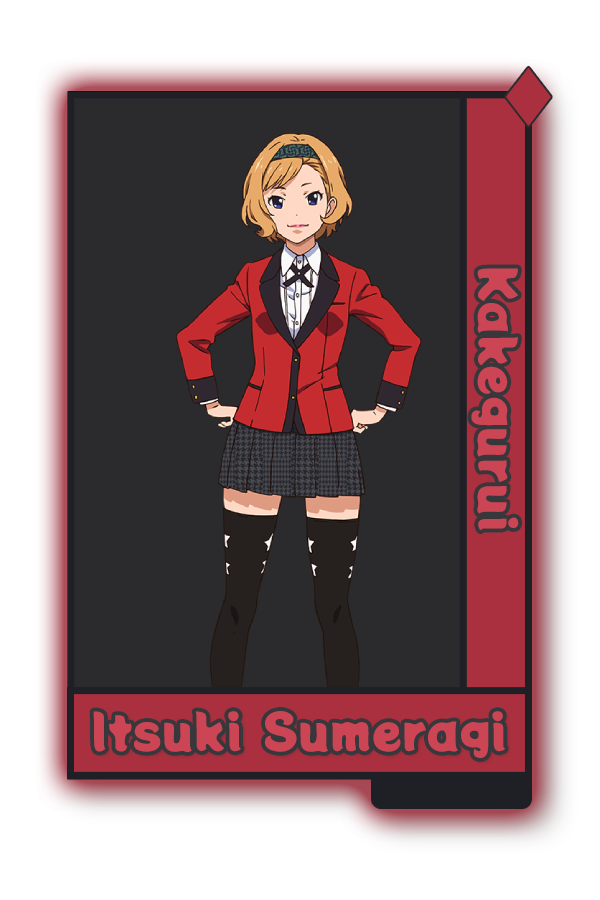
<style>
.page{position:relative;width:600px;height:900px;background:#2b2a2d}
.page>*{position:absolute;margin:0}
.t1{font:80px "DejaVuSans";color:#ab303f}
.t2{font:50px "PottaOne-Regular";color:#cb4554}
</style>
<div class="page">
<p class="t1" style="left:506px;top:67px;width:45px;height:59px">♦️</p>
<p class="t2" style="left:471px;top:268px;width:48px;height:263px;rotate:90deg">Kakegurui</p>
<p class="t2" style="left:93px;top:710px;width:413px;height:49px">Itsuki Sumeragi</p>
</div>
